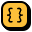
<style>
.page{position:relative;width:32px;height:32px;background:#fdc03a}
.page>*{position:absolute;margin:0}
.t1{font:16px "RedHatMonoVF-Medium";letter-spacing:-0.26em;color:#000000;scale:0.92 1}
</style>
<div class="page">
<p class="t1" style="left:7px;top:7px;width:16px;height:16px">{ }</p>
<p class="t1" style="left:7px;top:7px;width:16px;height:16px">{ }</p>
</div>
